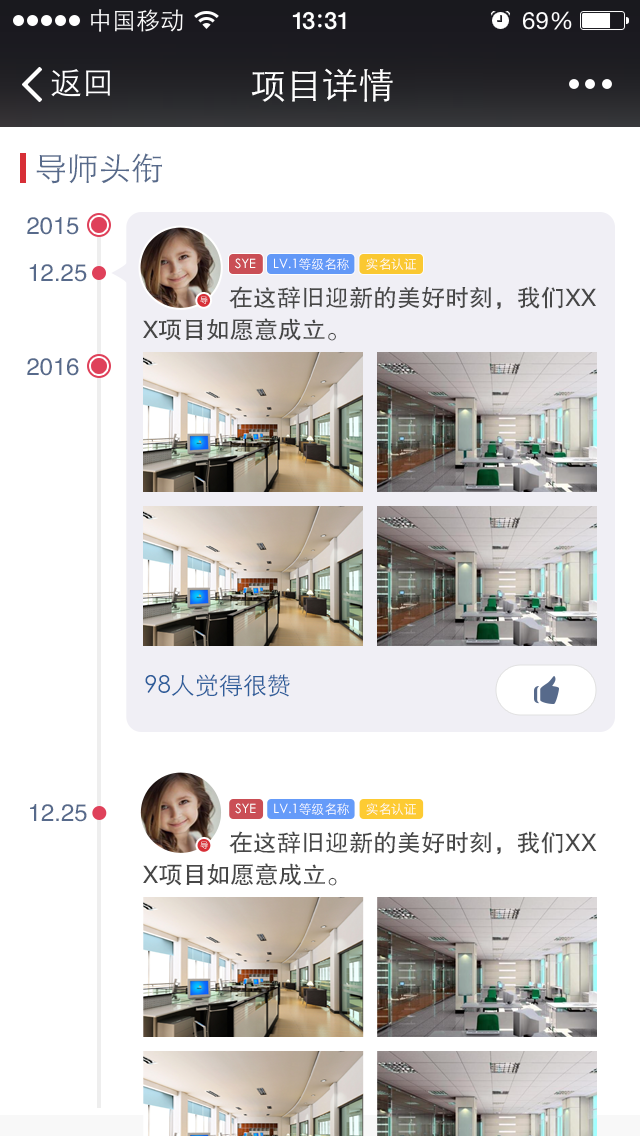
<style>
.page{position:relative;width:640px;height:1136px;background:#ffffff}
.page>*{position:absolute;margin:0}
.t1{font:36px "STHeitiSC-Light";color:#ffffff}
.t2{font:32px "STHeitiSC-Light";color:#576a8b}
.t3{font:24px "FZHTJW--GB1-0";color:#576a8b}
.t4{font:12.8px "STHeitiSC-Light";color:#ffffff}
.t5{font:24px/32px "FZHTJW--GB1-0";color:#474747}
.t6{font:8px "STHeitiSC-Light"}
.t7{font:24px "STHeitiSC-Light";color:#2f5e9b}
</style>
<div class="page">
<p class="t1" style="left:251px;top:68px;width:142px;height:34px">项目详情</p>
<p class="t2" style="left:36px;top:153px;width:126px;height:31px">导师头衔</p>
<p class="t3" style="left:27px;top:217px;width:52px;height:18px">2015</p>
<p class="t3" style="left:29px;top:264px;width:58px;height:18px">12.25</p>
<p class="t4" style="left:235px;top:258px;width:21px;height:11px">SYE</p>
<p class="t4" style="left:274px;top:258px;width:75px;height:12px">LV.1等级名称</p>
<p class="t4" style="left:366px;top:258px;width:50px;height:12px">实名认证</p>
<p class="t5" style="left:143px;top:286px;width:453px;height:55px">在这辞旧迎新的美好时刻，我们XX<br>X项目如愿意成立。</p>
<p class="t6" style="left:200px;top:296px;width:8px;height:8px">导</p>
<p class="t3" style="left:27px;top:358px;width:52px;height:18px">2016</p>
<p class="t7" style="left:145px;top:674px;width:145px;height:23px">98人觉得很赞</p>
<p class="t3" style="left:30px;top:804px;width:57px;height:18px">12.25</p>
<p class="t4" style="left:235px;top:803px;width:21px;height:11px">SYE</p>
<p class="t4" style="left:274px;top:803px;width:75px;height:12px">LV.1等级名称</p>
<p class="t4" style="left:366px;top:803px;width:50px;height:12px">实名认证</p>
<p class="t5" style="left:143px;top:831px;width:454px;height:55px">在这辞旧迎新的美好时刻，我们XX<br>X项目如愿意成立。</p>
<p class="t6" style="left:200px;top:841px;width:8px;height:8px">导</p>
</div>
